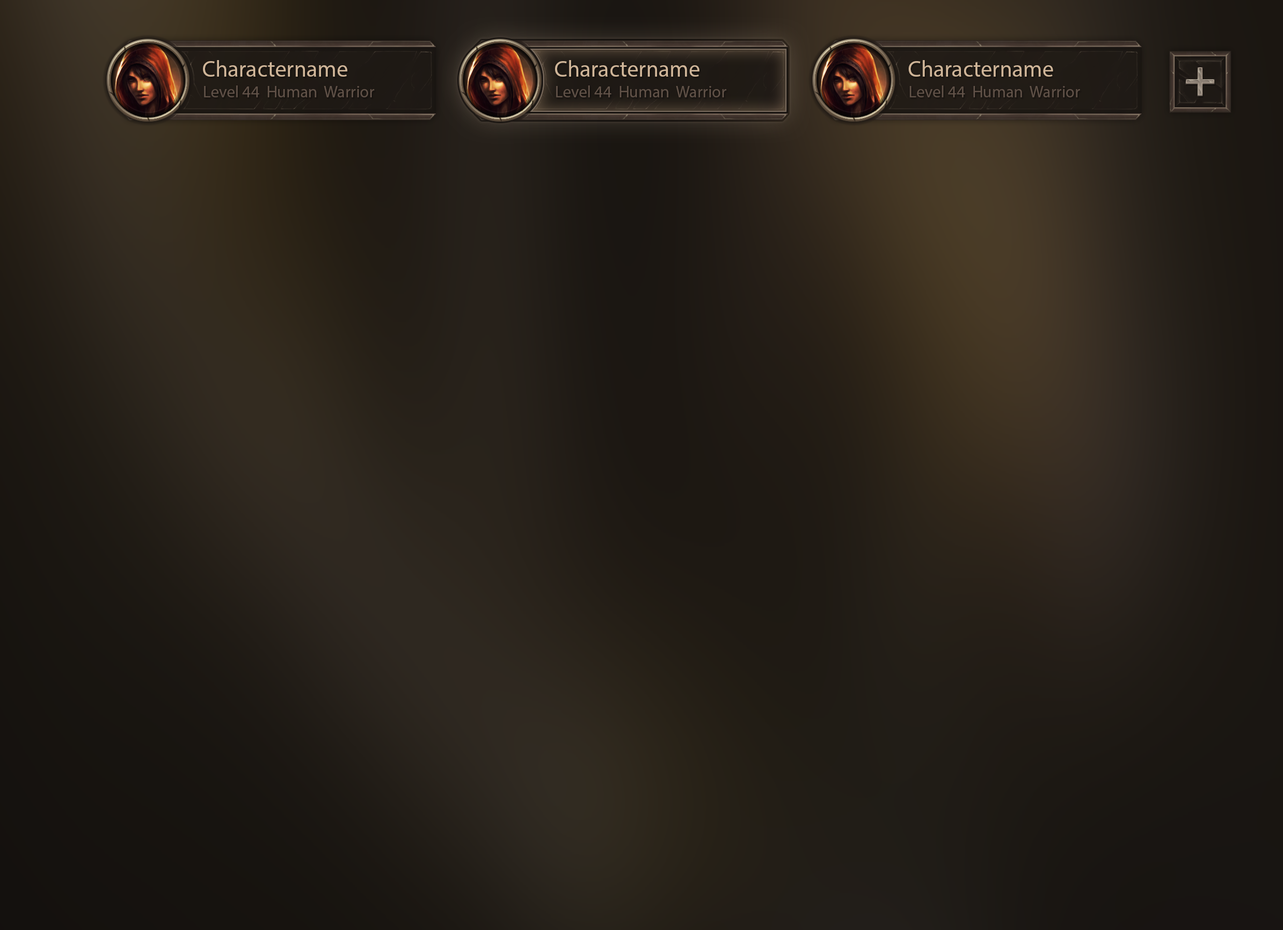
<style>
.page{position:relative;width:1283px;height:930px}
.page>*{position:absolute;margin:0}
.t1{font:22.8px "MyriadPro-Regular";color:#cfb598}
.t2{font:16.6px "MyriadPro-Regular";color:#615248}
</style>
<div class="page">
<p class="t1" style="left:203px;top:60px;width:144px;height:17px">Charactername</p>
<p class="t1" style="left:555px;top:60px;width:144px;height:17px">Charactername</p>
<p class="t1" style="left:908px;top:60px;width:145px;height:17px">Charactername</p>
<p class="t2" style="left:204px;top:85px;width:170px;height:12px">Level 44  Human  Warrior</p>
<p class="t2" style="left:556px;top:85px;width:170px;height:12px">Level 44  Human  Warrior</p>
<p class="t2" style="left:909px;top:85px;width:171px;height:12px">Level 44  Human  Warrior</p>
</div>
